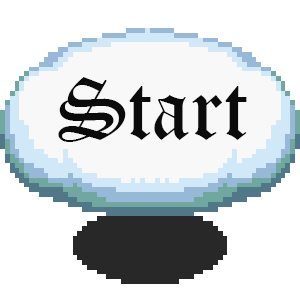
<style>
.page{position:relative;width:300px;height:300px;background:#ffffff}
.page>*{position:absolute;margin:0}
.t1{font:85px "OldEnglishTextMT";color:#0b0b0b}
</style>
<div class="page">
<p class="t1" style="left:58px;top:77px;width:189px;height:65px">Start</p>
</div>
